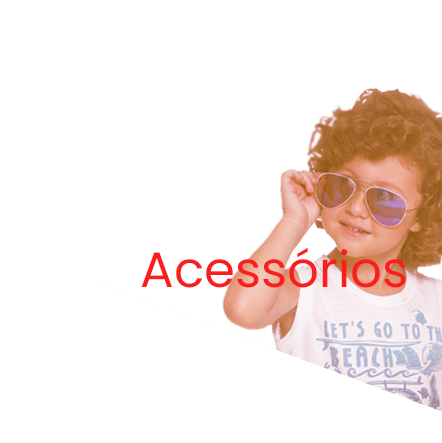
<style>
.page{position:relative;width:442px;height:443px;background:#ffffff}
.page>*{position:absolute;margin:0}
.t1{font:49.9px "Poppins-Regular";color:#fa1f1f}
</style>
<div class="page">
<p class="t1" style="left:141px;top:247px;width:265px;height:41px">Acessórios</p>
</div>
